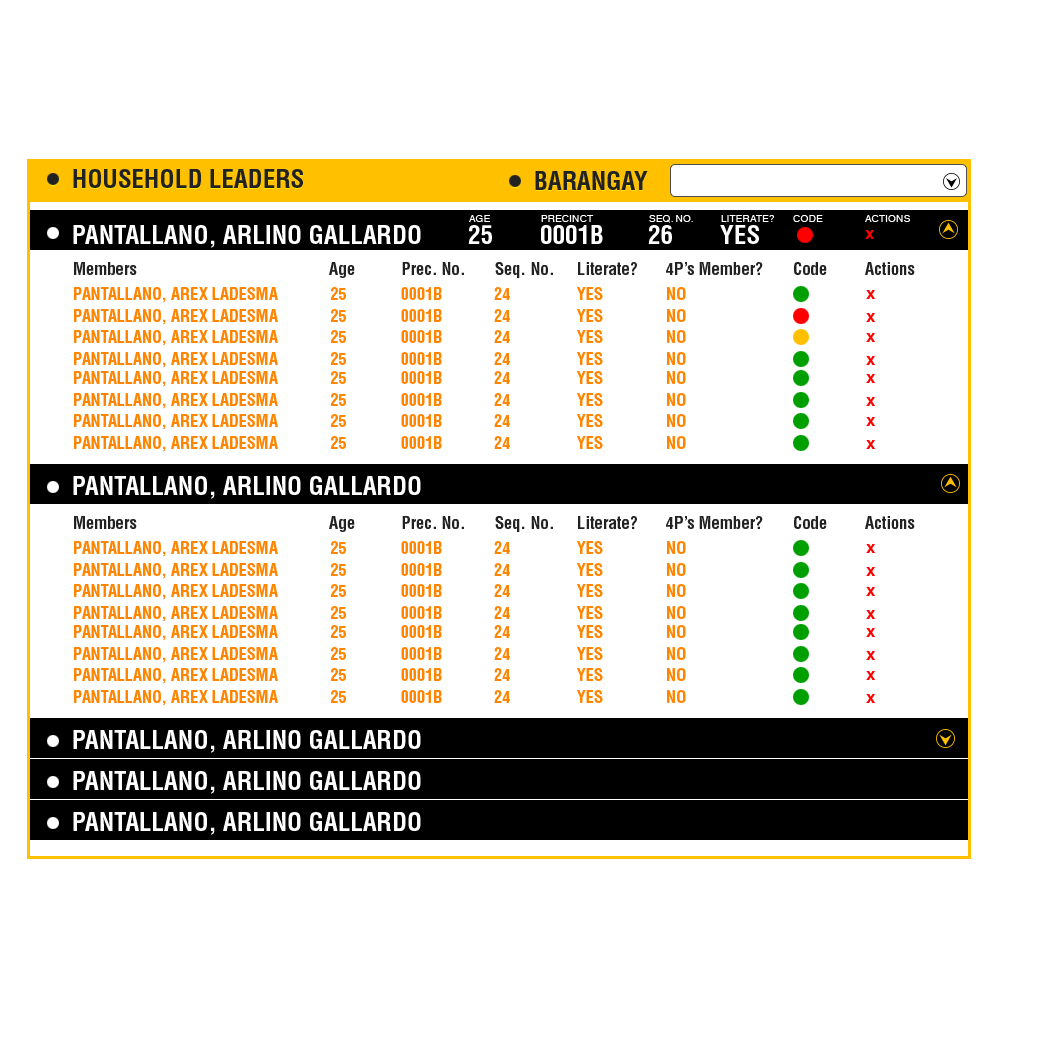
<style>
.page{position:relative;width:1050px;height:1050px;background:#ffffff}
.page>*{position:absolute;margin:0}
.t1{font:25px "HelveticaCE-CondBold";color:#222222}
.t2{font:10.4px "HelveticaWorld-Regular";color:#ffffff}
.t3{font:25px "HelveticaCE-CondBold";color:#ffffff}
.t4{font:16.7px "Helvetica-Bold";color:#ff0000}
.t5{font:16.7px "HelveticaCE-CondBold";color:#222222}
.t6{font:16.3px "HelveticaCE-CondBold";color:#ff8400}
</style>
<div class="page">
<p class="t1" style="left:73px;top:169px;width:230px;height:19px">HOUSEHOLD LEADERS</p>
<p class="t1" style="left:535px;top:171px;width:113px;height:19px">BARANGAY</p>
<p class="t2" style="left:469px;top:215px;width:441px;height:8px">AGE  PRECINCT  SEQ. NO. LITERATE? CODE  ACTIONS</p>
<p class="t3" style="left:73px;top:225px;width:686px;height:23px">PANTALLANO, ARLINO GALLARDO  25  0001B  26  YES</p>
<p class="t4" style="left:865px;top:230px;width:9px;height:9px">x</p>
<p class="t5" style="left:74px;top:262px;width:841px;height:16px">Members       Age   Prec. No.       Seq. No. Literate?     4P’s Member? Code  Actions</p>
<p class="t6" style="left:74px;top:287px;width:612px;height:16px">PANTALLANO, AREX LADESMA   25   0001B   24      YES     NO</p>
<p class="t4" style="left:866px;top:290px;width:9px;height:9px">x</p>
<p class="t6" style="left:74px;top:309px;width:612px;height:16px">PANTALLANO, AREX LADESMA   25   0001B   24      YES     NO</p>
<p class="t4" style="left:866px;top:313px;width:9px;height:9px">x</p>
<p class="t6" style="left:74px;top:330px;width:612px;height:16px">PANTALLANO, AREX LADESMA   25   0001B   24      YES     NO</p>
<p class="t4" style="left:866px;top:333px;width:9px;height:9px">x</p>
<p class="t6" style="left:74px;top:352px;width:612px;height:16px">PANTALLANO, AREX LADESMA   25   0001B   24      YES     NO</p>
<p class="t4" style="left:866px;top:356px;width:9px;height:9px">x</p>
<p class="t6" style="left:74px;top:371px;width:612px;height:16px">PANTALLANO, AREX LADESMA   25   0001B   24      YES     NO</p>
<p class="t4" style="left:866px;top:374px;width:9px;height:9px">x</p>
<p class="t6" style="left:74px;top:393px;width:612px;height:16px">PANTALLANO, AREX LADESMA   25   0001B   24      YES     NO</p>
<p class="t4" style="left:866px;top:397px;width:9px;height:9px">x</p>
<p class="t6" style="left:74px;top:414px;width:612px;height:16px">PANTALLANO, AREX LADESMA   25   0001B   24      YES     NO</p>
<p class="t4" style="left:866px;top:417px;width:9px;height:9px">x</p>
<p class="t6" style="left:74px;top:436px;width:612px;height:16px">PANTALLANO, AREX LADESMA   25   0001B   24      YES     NO</p>
<p class="t4" style="left:866px;top:440px;width:9px;height:9px">x</p>
<p class="t3" style="left:73px;top:476px;width:348px;height:23px">PANTALLANO, ARLINO GALLARDO</p>
<p class="t5" style="left:74px;top:516px;width:841px;height:16px">Members       Age   Prec. No.       Seq. No. Literate?     4P’s Member? Code  Actions</p>
<p class="t6" style="left:74px;top:541px;width:612px;height:16px">PANTALLANO, AREX LADESMA   25   0001B   24      YES     NO</p>
<p class="t4" style="left:866px;top:544px;width:9px;height:9px">x</p>
<p class="t6" style="left:74px;top:563px;width:612px;height:16px">PANTALLANO, AREX LADESMA   25   0001B   24      YES     NO</p>
<p class="t4" style="left:866px;top:567px;width:9px;height:9px">x</p>
<p class="t6" style="left:74px;top:584px;width:612px;height:16px">PANTALLANO, AREX LADESMA   25   0001B   24      YES     NO</p>
<p class="t4" style="left:866px;top:587px;width:9px;height:9px">x</p>
<p class="t6" style="left:74px;top:606px;width:612px;height:16px">PANTALLANO, AREX LADESMA   25   0001B   24      YES     NO</p>
<p class="t4" style="left:866px;top:610px;width:9px;height:9px">x</p>
<p class="t6" style="left:74px;top:625px;width:612px;height:16px">PANTALLANO, AREX LADESMA   25   0001B   24      YES     NO</p>
<p class="t4" style="left:866px;top:628px;width:9px;height:9px">x</p>
<p class="t6" style="left:74px;top:647px;width:612px;height:16px">PANTALLANO, AREX LADESMA   25   0001B   24      YES     NO</p>
<p class="t4" style="left:866px;top:651px;width:9px;height:9px">x</p>
<p class="t6" style="left:74px;top:668px;width:612px;height:16px">PANTALLANO, AREX LADESMA   25   0001B   24      YES     NO</p>
<p class="t4" style="left:866px;top:671px;width:9px;height:9px">x</p>
<p class="t6" style="left:74px;top:690px;width:612px;height:16px">PANTALLANO, AREX LADESMA   25   0001B   24      YES     NO</p>
<p class="t4" style="left:866px;top:694px;width:9px;height:9px">x</p>
<p class="t3" style="left:73px;top:730px;width:348px;height:23px">PANTALLANO, ARLINO GALLARDO</p>
<p class="t3" style="left:73px;top:771px;width:348px;height:23px">PANTALLANO, ARLINO GALLARDO</p>
<p class="t3" style="left:73px;top:812px;width:348px;height:23px">PANTALLANO, ARLINO GALLARDO</p>
</div>
